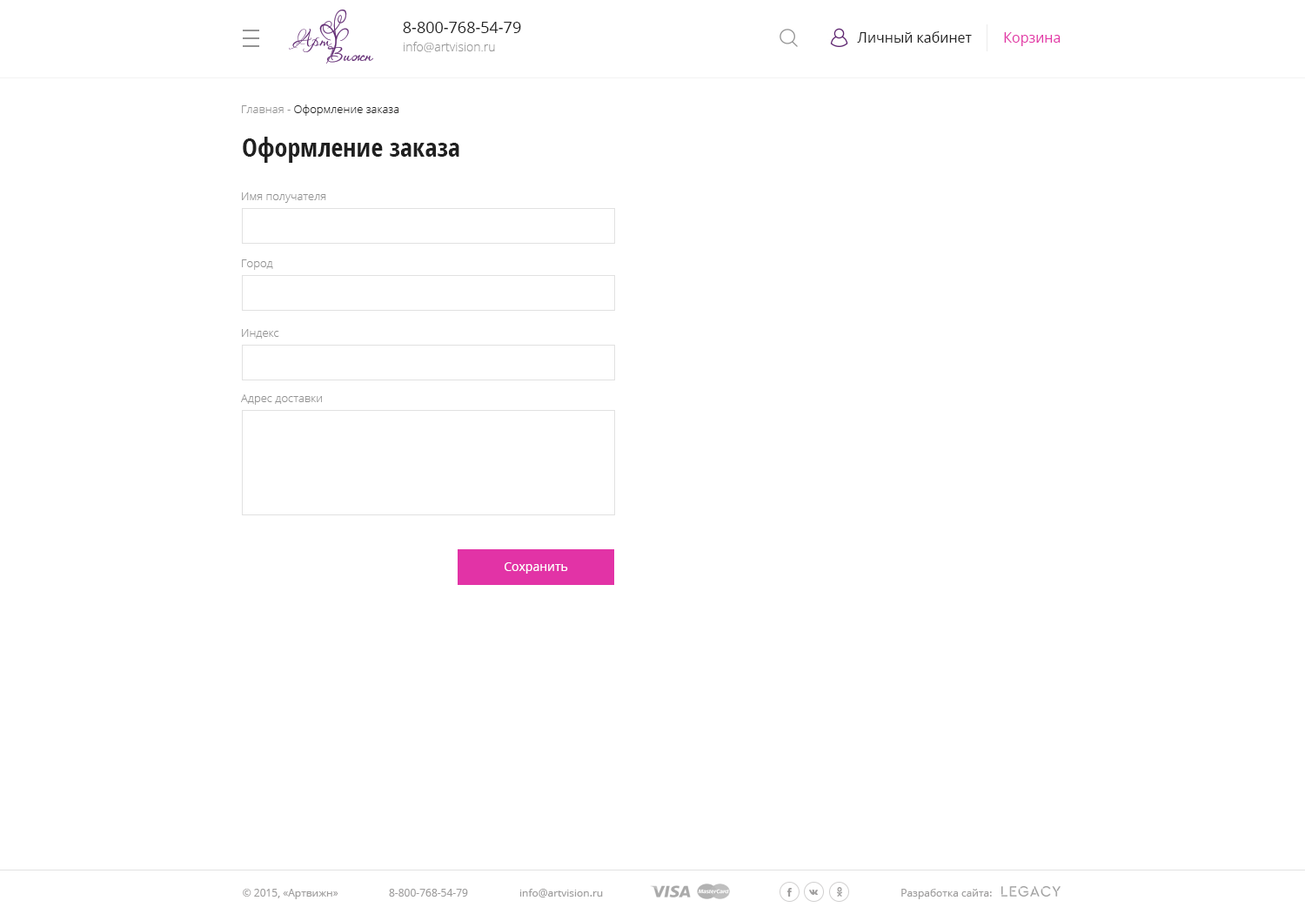
<style>
.page{position:relative;width:1305px;height:914px;background:#ffffff}
.page>*{position:absolute;margin:0}
.t1{font:15.7px "OpenSans";color:#202020}
.t2{font:12.2px "OpenSans-Light";color:#999999}
.t3{font:13.9px "OpenSans";color:#202020}
.t4{font:13.9px "OpenSans";color:#e233a6}
.t5{font:11.3px "OpenSans-Light";color:#202020}
.t6{font:11.3px "OpenSans-Light";color:#939393}
.t7{font:26.1px "OpenSans-CondensedBold";color:#202020}
.t8{font:12.2px "OpenSans";color:#ffffff}
.t9{font:10.4px "OpenSans";color:#9e9d9d}
</style>
<div class="page">
<p class="t1" style="left:403px;top:22px;width:118px;height:11px">8-800-768-54-79</p>
<p class="t2" style="left:404px;top:42px;width:91px;height:10px">info@artvision.ru</p>
<p class="t3" style="left:857px;top:31px;width:115px;height:12px">Личный кабинет</p>
<p class="t4" style="left:1004px;top:32px;width:57px;height:14px">Корзина</p>
<p class="t5" style="left:242px;top:104px;width:157px;height:12px"><span class="t6">Главная - </span>Оформление заказа</p>
<p class="t7" style="left:243px;top:137px;width:216px;height:26px">Оформление заказа</p>
<p class="t6" style="left:242px;top:192px;width:84px;height:11px">Имя получателя</p>
<p class="t6" style="left:242px;top:259px;width:31px;height:11px">Город</p>
<p class="t6" style="left:242px;top:329px;width:37px;height:9px">Индекс</p>
<p class="t6" style="left:241px;top:394px;width:81px;height:11px">Адрес доставки</p>
<p class="t8" style="left:505px;top:562px;width:63px;height:11px">Сохранить</p>
<p class="t9" style="left:243px;top:888px;width:95px;height:11px">© 2015, «Артвижн»</p>
<p class="t9" style="left:389px;top:888px;width:79px;height:8px">8-800-768-54-79</p>
<p class="t9" style="left:519px;top:888px;width:84px;height:9px">info@artvision.ru</p>
<p class="t9" style="left:901px;top:888px;width:91px;height:11px">Разработка сайта:</p>
</div>
